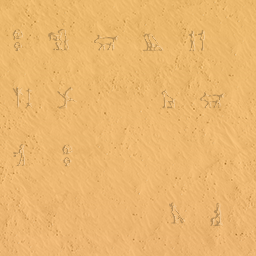
<style>
.page{position:relative;width:256px;height:256px}
.page>*{position:absolute;margin:0}
.t1{font:24px "Hieroglify"}
</style>
<div class="page">
<p class="t1" style="left:12px;top:29px;width:213px;height:198px">a  b  e  t  m<br><br>k  l       c  e<br><br>y   a<br><br>             u  p</p>
</div>
